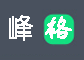
<style>
.page{position:relative;width:84px;height:60px;background:#49515e}
.page>*{position:absolute;margin:0}
.t1{font:26.3px "YouYuan";letter-spacing:0.2em;color:#ffffff;font-weight:bold}
.t2{font:30px "FZSTK--GBK1-0";letter-spacing:0.2em;color:#ffffff;font-weight:bold}
</style>
<div class="page">
<p class="t1" style="left:9px;top:15px;width:24px;height:26px">峰</p>
<p class="t2" style="left:45px;top:16px;width:27px;height:23px">格</p>
</div>
